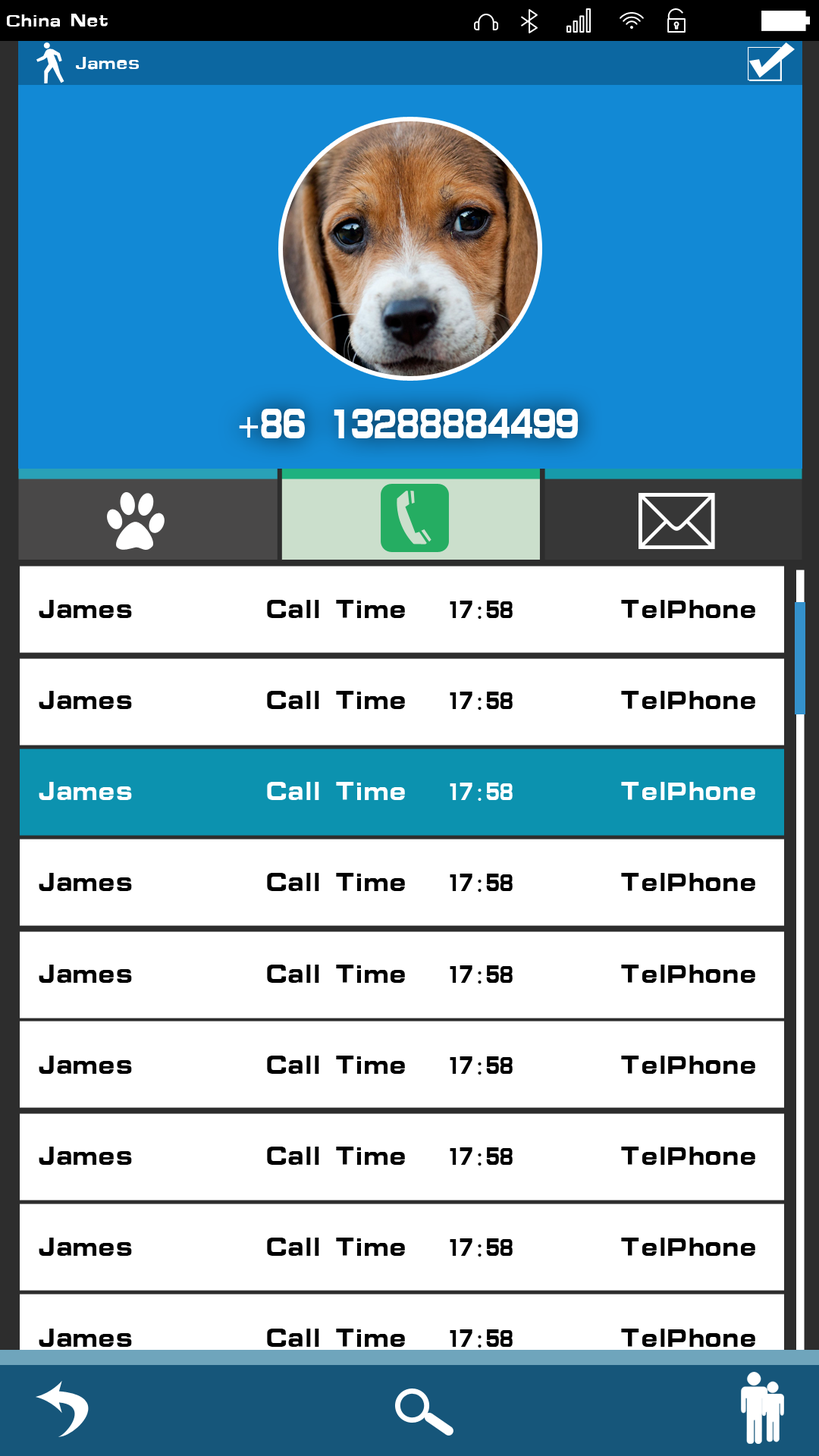
<style>
.page{position:relative;width:819px;height:1456px;background:#ffffff}
.page>*{position:absolute;margin:0}
.t1{font:18.2px "ç»å¸ç»¼èºä½ç®-regular";color:#ffffff}
.t2{font:45.5px "ç»å¸ç»¼èºä½ç®-regular";color:#ffffff}
.t3{font:27.3px "ç»å¸ç»¼èºä½ç®-regular";color:#000000}
.t4{font:27.3px "SimSun";color:#000000}
.t5{font:27.3px "ç»å¸ç»¼èºä½ç®-regular";color:#ffffff}
.t6{font:27.3px "SimSun";color:#ffffff}
</style>
<div class="page">
<p class="t1" style="left:7px;top:14px;width:101px;height:13px">China Net</p>
<p class="t1" style="left:76px;top:57px;width:63px;height:13px">James</p>
<p class="t2" style="left:239px;top:409px;width:339px;height:29px">+86 13288884499</p>
<p class="t3" style="left:39px;top:600px;width:716px;height:19px">James          Call Time   17<span class="t4">:</span>58      TelPhone</p>
<p class="t3" style="left:39px;top:691px;width:716px;height:19px">James          Call Time   17<span class="t4">:</span>58      TelPhone</p>
<p class="t5" style="left:39px;top:782px;width:716px;height:19px">James          Call Time   17<span class="t6">:</span>58      TelPhone</p>
<p class="t3" style="left:39px;top:873px;width:716px;height:19px">James          Call Time   17<span class="t4">:</span>58      TelPhone</p>
<p class="t3" style="left:39px;top:965px;width:716px;height:19px">James          Call Time   17<span class="t4">:</span>58      TelPhone</p>
<p class="t3" style="left:39px;top:1056px;width:716px;height:19px">James          Call Time   17<span class="t4">:</span>58      TelPhone</p>
<p class="t3" style="left:39px;top:1147px;width:716px;height:19px">James          Call Time   17<span class="t4">:</span>58      TelPhone</p>
<p class="t3" style="left:39px;top:1238px;width:716px;height:19px">James          Call Time   17<span class="t4">:</span>58      TelPhone</p>
<p class="t3" style="left:39px;top:1329px;width:716px;height:19px">James          Call Time   17<span class="t4">:</span>58      TelPhone</p>
</div>
